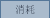
<style>
.page{position:relative;width:50px;height:18px;background:#aabbcc}
.page>*{position:absolute;margin:0}
.t1{font:10px "SimSun"}
</style>
<div class="page">
<p class="t1" style="left:15px;top:4px;width:20px;height:10px">消耗</p>
</div>
